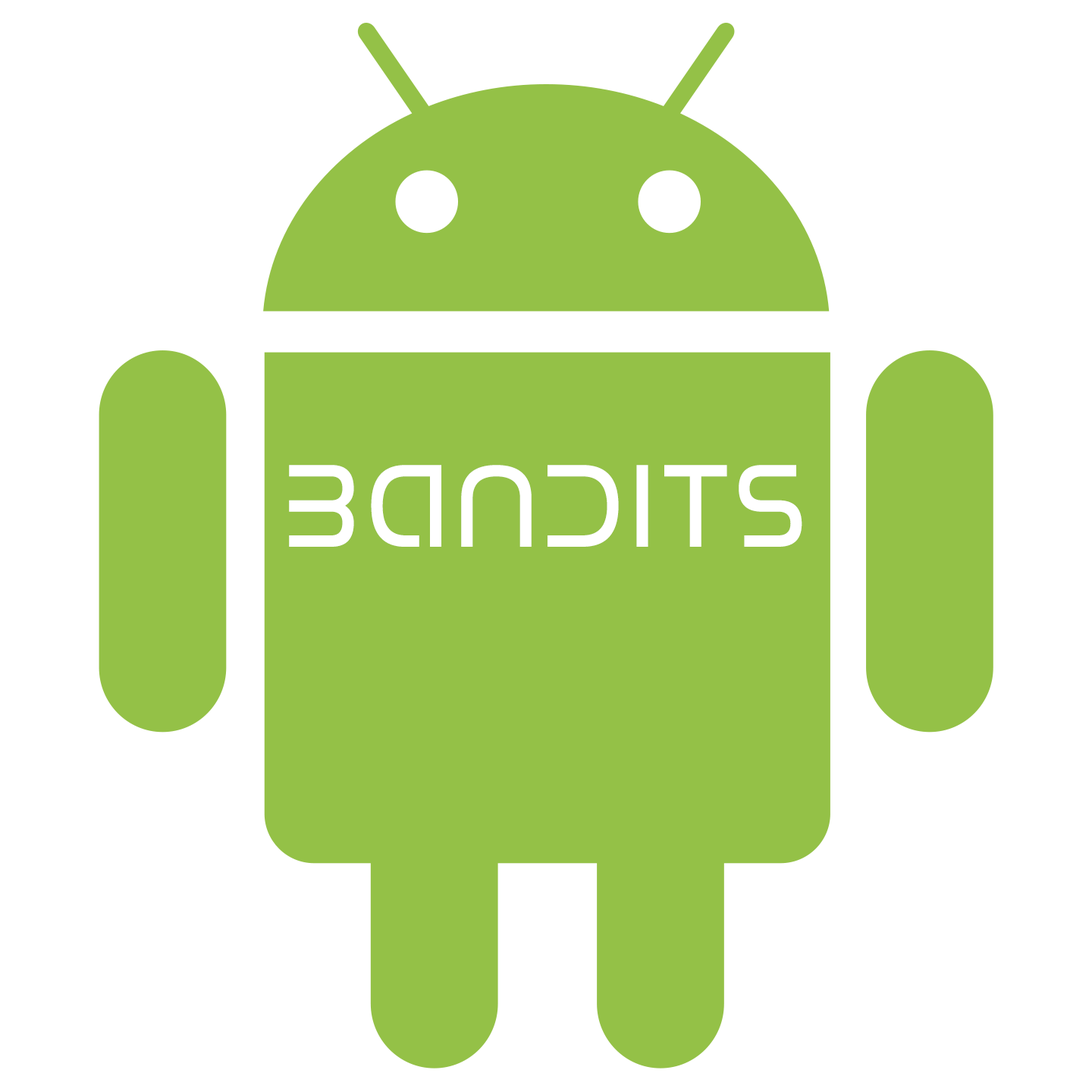
<style>
.page{position:relative;width:1092px;height:1092px;background:#ffffff}
.page>*{position:absolute;margin:0}
.t1{font:113.7px "DroidLogo";color:#ffffff}
</style>
<div class="page">
<p class="t1" style="left:289px;top:465px;width:513px;height:82px">BANDITS</p>
</div>
